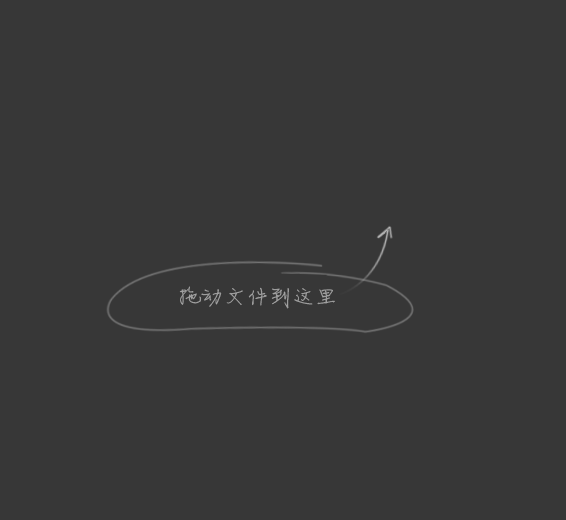
<style>
.page{position:relative;width:566px;height:520px;background:#373737}
.page>*{position:absolute;margin:0}
.t1{font:24px "FZJLJW--GB1-0";letter-spacing:-0.05em;color:#a3a3a3}
</style>
<div class="page">
<p class="t1" style="left:179px;top:286px;width:156px;height:23px">拖动文件到这里</p>
</div>
